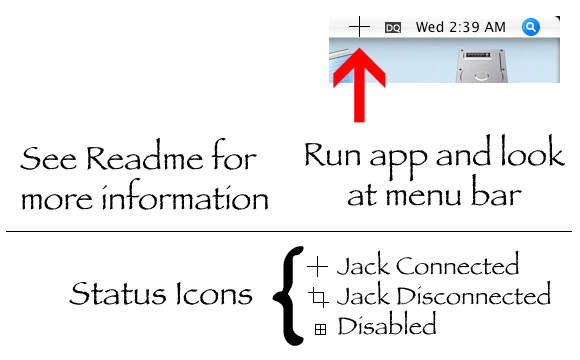
<style>
.page{position:relative;width:580px;height:360px;background:#ffffff}
.page>*{position:absolute;margin:0}
.t1{font:33.3px "Papyrus";color:#000000}
.t2{font:150px "Papyrus";color:#000000}
.t3{font:25px "Papyrus";color:#000000}
</style>
<div class="page">
<p class="t1" style="left:305px;top:133px;width:260px;height:73px;text-align:center">Run app and look at menu bar</p>
<p class="t1" style="left:20px;top:138px;width:248px;height:72px">See Readme for more information</p>
<p class="t2" style="left:272px;top:246px;width:32px;height:100px">{</p>
<p class="t3" style="left:337px;top:250px;width:214px;height:85px">Jack Connected<br>Jack Disconnected<br>Disabled</p>
<p class="t1" style="left:69px;top:282px;width:184px;height:23px">Status Icons</p>
</div>
